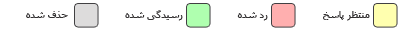
<style>
.page{position:relative;width:400px;height:30px;background:#ffffff}
.page>*{position:absolute;margin:0}
.t1{font:9.5px "Tahoma";color:#333132}
</style>
<div class="page">
<p class="t1" style="left:26px;top:11px;width:42px;height:7px">حذف شده</p>
<p class="t1" style="left:125px;top:10px;width:58px;height:11px">رسیدگی شده</p>
<p class="t1" style="left:237px;top:12px;width:31px;height:9px">رد شده</p>
<p class="t1" style="left:323px;top:11px;width:47px;height:10px">منتظر پاسخ</p>
</div>
